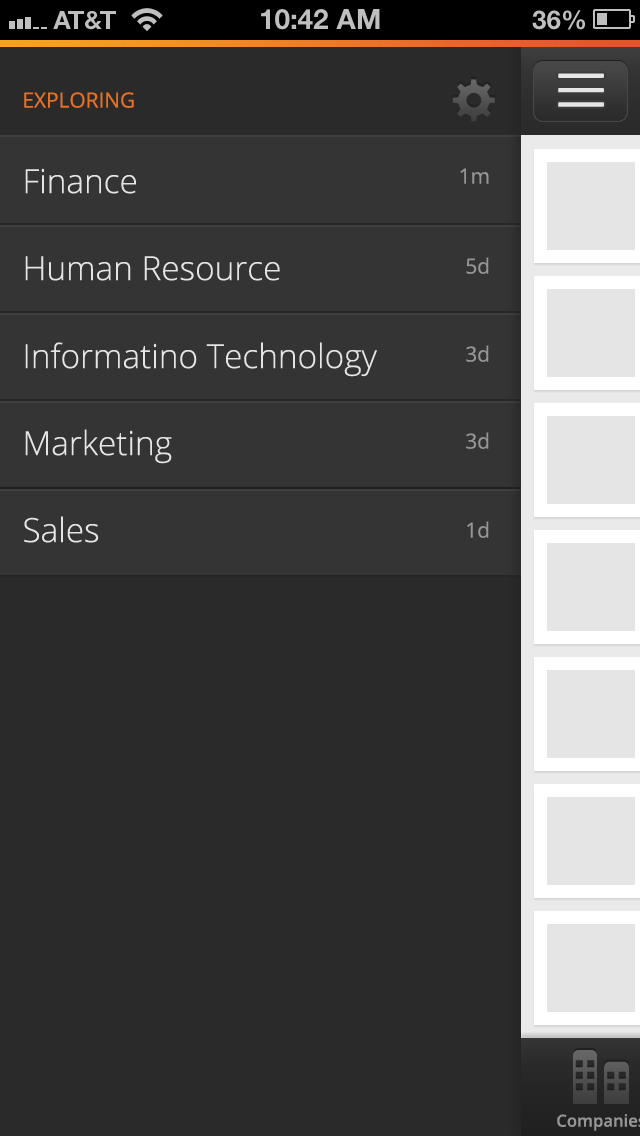
<style>
.page{position:relative;width:640px;height:1136px;background:#2a2a2a}
.page>*{position:absolute;margin:0}
.t1{font:20.8px "OpenSans";color:#e57128}
.t2{font:33.3px "OpenSans-Light";color:#e5e5e5}
.t3{font:20.8px "OpenSans";color:#969696}
</style>
<div class="page">
<p class="t1" style="left:24px;top:92px;width:110px;height:16px">EXPLORING</p>
<p class="t2" style="left:25px;top:168px;width:111px;height:26px">Finance</p>
<p class="t3" style="left:460px;top:168px;width:29px;height:16px">1m</p>
<p class="t2" style="left:25px;top:256px;width:255px;height:25px">Human Resource</p>
<p class="t3" style="left:466px;top:257px;width:23px;height:17px">5d</p>
<p class="t2" style="left:25px;top:342px;width:352px;height:35px">Informatino Technology</p>
<p class="t3" style="left:466px;top:345px;width:23px;height:17px">3d</p>
<p class="t2" style="left:25px;top:429px;width:147px;height:35px">Marketing</p>
<p class="t3" style="left:466px;top:432px;width:23px;height:17px">3d</p>
<p class="t2" style="left:24px;top:516px;width:75px;height:27px">Sales</p>
<p class="t3" style="left:467px;top:521px;width:22px;height:17px">1d</p>
</div>
